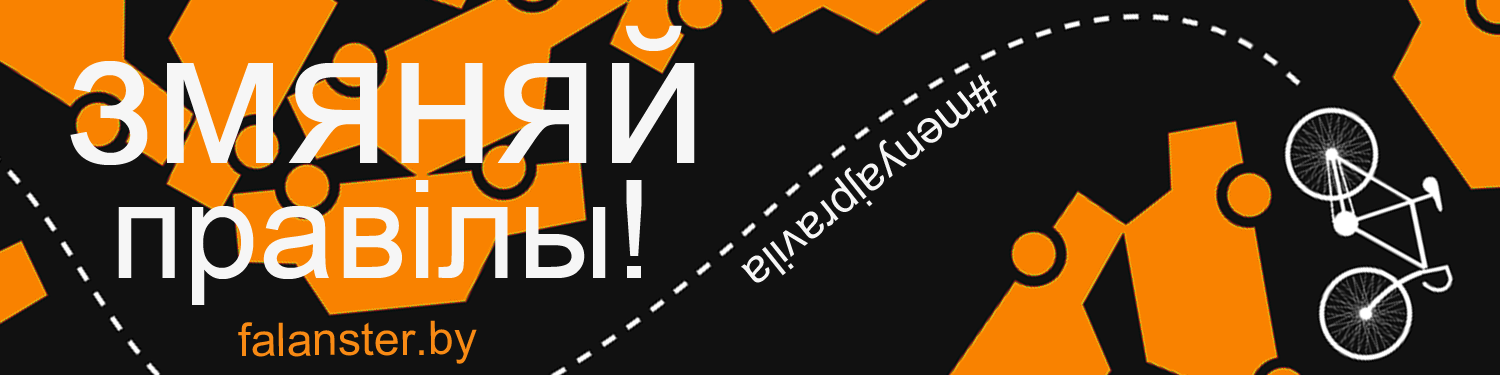
<style>
.page{position:relative;width:1500px;height:375px;background:#111111}
.page>*{position:absolute;margin:0}
.t1{font:191.6px "ArialMT";color:#f6f6f6}
.t2{font:46.4px "ArialMT";color:#f6f6f6}
.t3{font:136.2px "ArialMT";color:#f6f6f6}
.t4{font:46.3px "ArialMT";color:#f88a14}
</style>
<div class="page">
<p class="t1" style="left:70px;top:25px;width:625px;height:140px">змяняй</p>
<p class="t2" style="left:741px;top:74px;width:257px;height:209px;rotate:141deg">#menyajpravila</p>
<p class="t3" style="left:118px;top:180px;width:524px;height:125px">правілы!</p>
<p class="t4" style="left:238px;top:320px;width:239px;height:44px">falanster.by</p>
</div>
